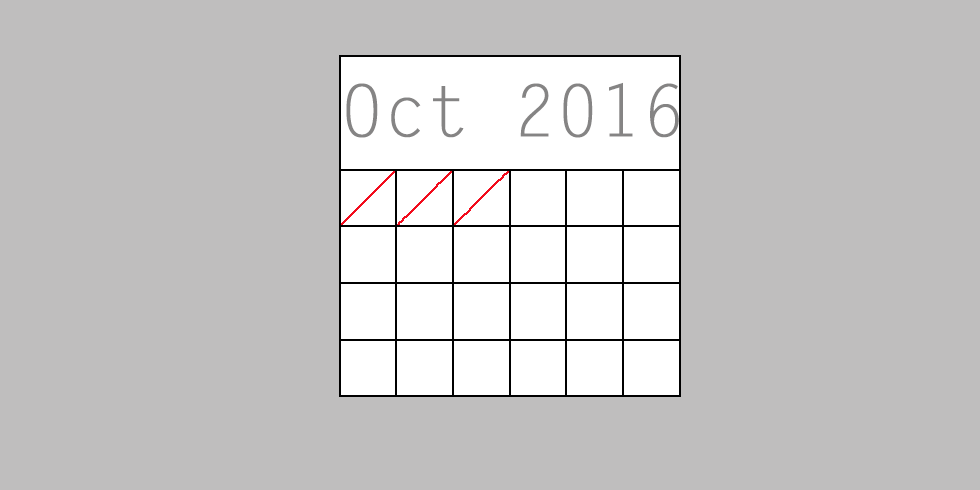
<style>
.page{position:relative;width:980px;height:490px;background:#bfbebe}
.page>*{position:absolute;margin:0}
.t1{font:72px "LetterGothicStd";color:#858484}
</style>
<div class="page">
<p class="t1" style="left:346px;top:82px;width:333px;height:56px">Oct 2016</p>
</div>
